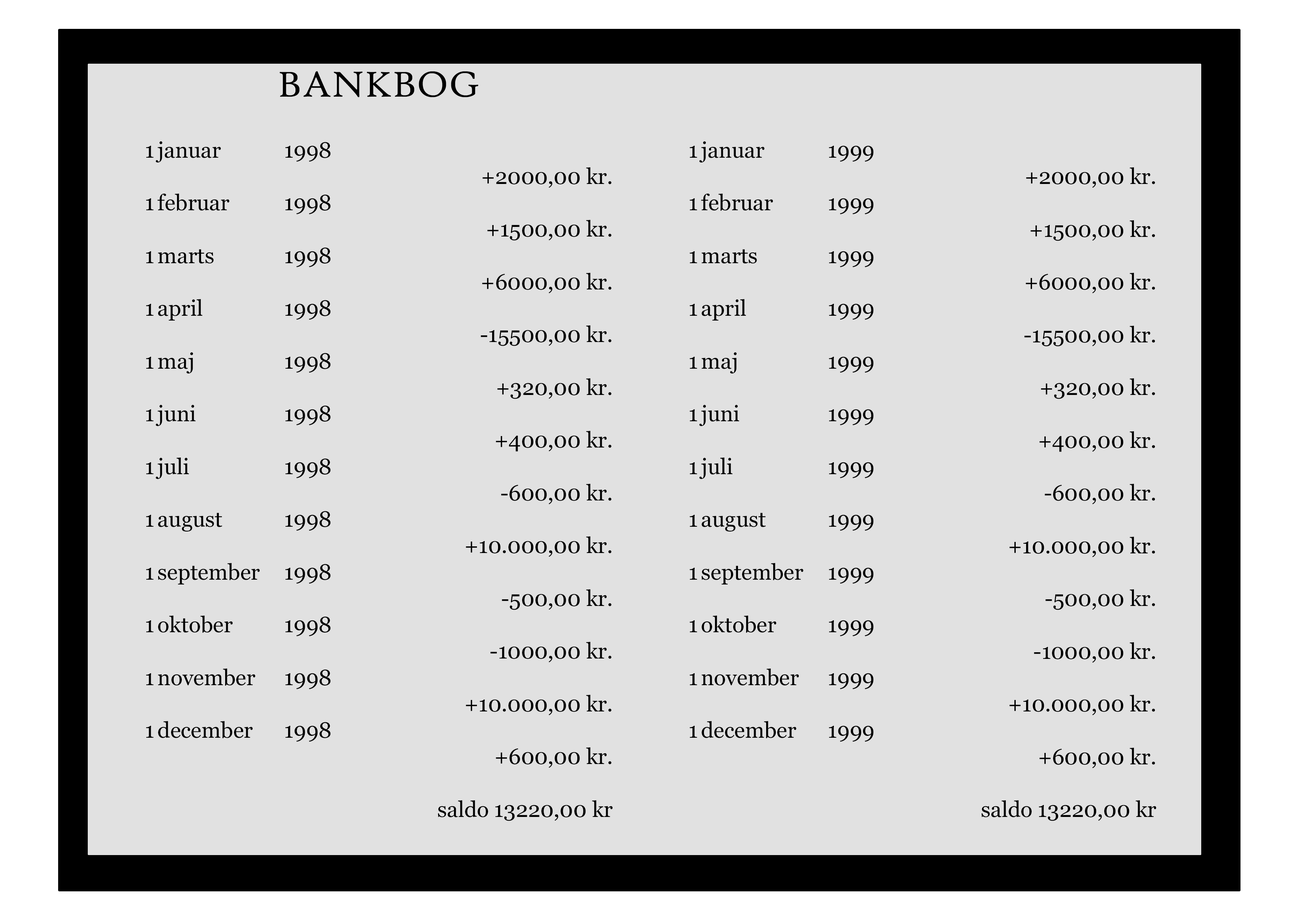
<style>
.page{position:relative;width:1299px;height:918px;background:#e1e1e1}
.page>*{position:absolute;margin:0}
.t1{font:38.6px "HighTowerText-Reg";color:#000000}
.t2{font:22px "Georgia";color:#000000}
</style>
<div class="page">
<p class="t1" style="left:280px;top:71px;width:198px;height:26px">BANKBOG</p>
<p class="t2" style="left:146px;top:141px;width:467px;height:680px">1 januar      1998<br>+2000,00 kr.<br>1 februar     1998<br>+1500,00 kr.<br>1 marts      1998<br>+6000,00 kr.<br>1 april       1998<br>-15500,00 kr.<br>1 maj        1998<br>+320,00 kr.<br>1 juni       1998<br>+400,00 kr.<br>1 juli        1998<br>-600,00 kr.<br>1 august     1998<br>+10.000,00 kr.<br>1 september  1998<br>-500,00 kr.<br>1 oktober     1998<br>-1000,00 kr.<br>1 november   1998<br>+10.000,00 kr.<br>1 december   1998<br>+600,00 kr.<br><br>saldo 13220,00 kr</p>
<p class="t2" style="left:689px;top:141px;width:467px;height:680px">1 januar      1999<br>+2000,00 kr.<br>1 februar     1999<br>+1500,00 kr.<br>1 marts      1999<br>+6000,00 kr.<br>1 april       1999<br>-15500,00 kr.<br>1 maj        1999<br>+320,00 kr.<br>1 juni       1999<br>+400,00 kr.<br>1 juli        1999<br>-600,00 kr.<br>1 august     1999<br>+10.000,00 kr.<br>1 september  1999<br>-500,00 kr.<br>1 oktober     1999<br>-1000,00 kr.<br>1 november   1999<br>+10.000,00 kr.<br>1 december   1999<br>+600,00 kr.<br><br>saldo 13220,00 kr</p>
</div>
